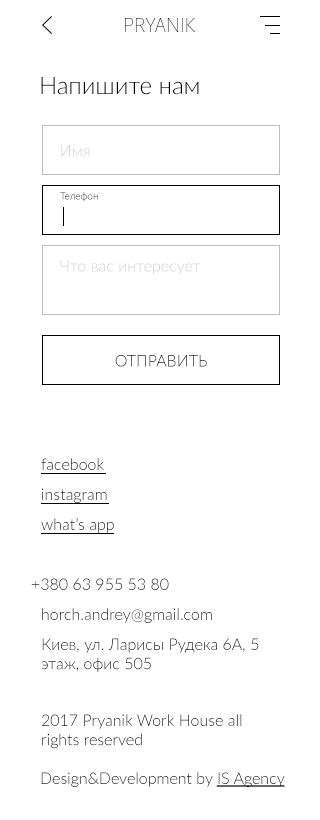
<style>
.page{position:relative;width:320px;height:820px;background:#ffffff}
.page>*{position:absolute;margin:0}
.t1{font:24px "Lato-Light";color:#000000}
.t2{font:16px "Lato-Light"}
.t3{font:10px "Lato-Light"}
.t4{font:16px "Lato-Light";color:#000000;text-transform:uppercase}
.t5{font:16px "Lato-Light";color:#000000}
.t6{font:16px "Lato-Light";color:#000000;text-decoration:underline}
</style>
<div class="page">
<p class="t1" style="left:41px;top:77px;width:158px;height:18px">Напишите нам</p>
<p class="t2" style="left:61px;top:145px;width:29px;height:12px">Имя</p>
<p class="t3" style="left:60px;top:192px;width:38px;height:10px">Телефон</p>
<p class="t2" style="left:60px;top:260px;width:141px;height:15px">Что вас интересует</p>
<p class="t4" style="left:115px;top:355px;width:92px;height:12px">Отправить</p>
<p class="t2" style="left:41px;top:458px;width:63px;height:12px">facebook</p>
<p class="t2" style="left:42px;top:488px;width:65px;height:15px">instagram</p>
<p class="t2" style="left:41px;top:518px;width:73px;height:15px">what’s app</p>
<p class="t2" style="left:31px;top:578px;width:138px;height:12px">+380 63 955 53 80</p>
<p class="t2" style="left:42px;top:608px;width:170px;height:15px">horch.andrey@gmail.com</p>
<p class="t5" style="left:41px;top:638px;width:218px;height:34px">Киев, ул. Ларисы Рудека 6А, 5 этаж, офис 505</p>
<p class="t5" style="left:42px;top:714px;width:200px;height:35px">2017 Pryanik Work House all rights reserved</p>
<p class="t5" style="left:41px;top:772px;width:244px;height:15px">Design&amp;Development by <span class="t6">IS Agency</span></p>
</div>
